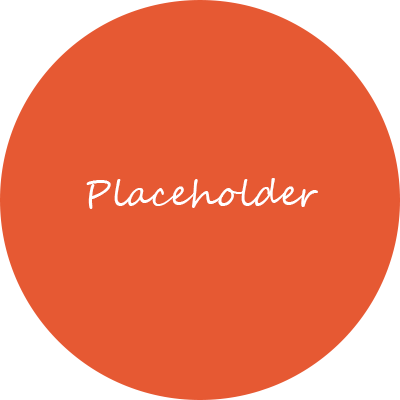
<style>
.page{position:relative;width:400px;height:400px;background:#e65933}
.page>*{position:absolute;margin:0}
.t1{font:36px "SegoeScript";color:#ffffff}
</style>
<div class="page">
<p class="t1" style="left:86px;top:178px;width:232px;height:31px">Placeholder</p>
</div>
